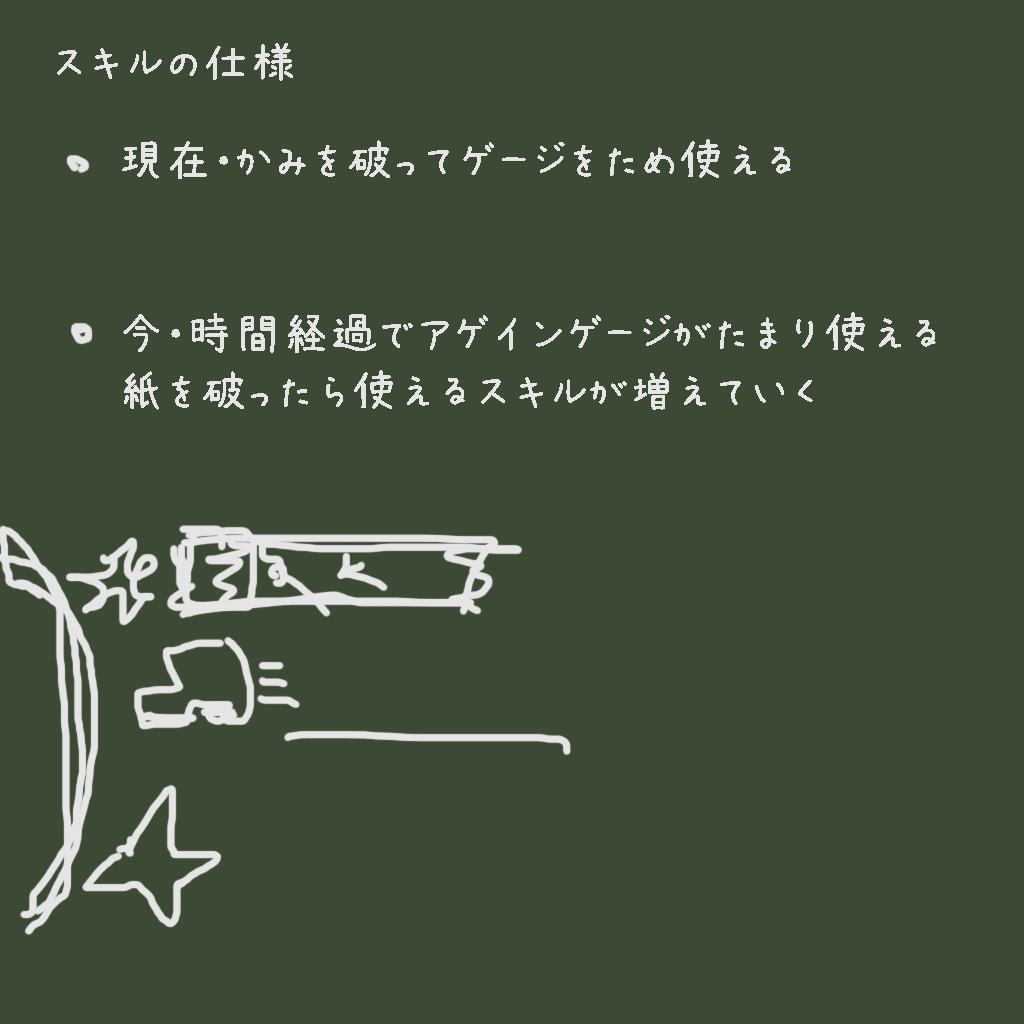
<style>
.page{position:relative;width:1024px;height:1024px;background:#3b4935}
.page>*{position:absolute;margin:0}
.t1{font:48px "APJapanesefont";color:#e5e5e5}
</style>
<div class="page">
<p class="t1" style="left:57px;top:43px;width:236px;height:38px">スキルの仕様</p>
<p class="t1" style="left:122px;top:139px;width:814px;height:271px">現在・かみを破ってゲージをため使える<br><br><br>今・時間経過でアゲインゲージがたまり使える<br>紙を破ったら使えるスキルが増えていく</p>
</div>
